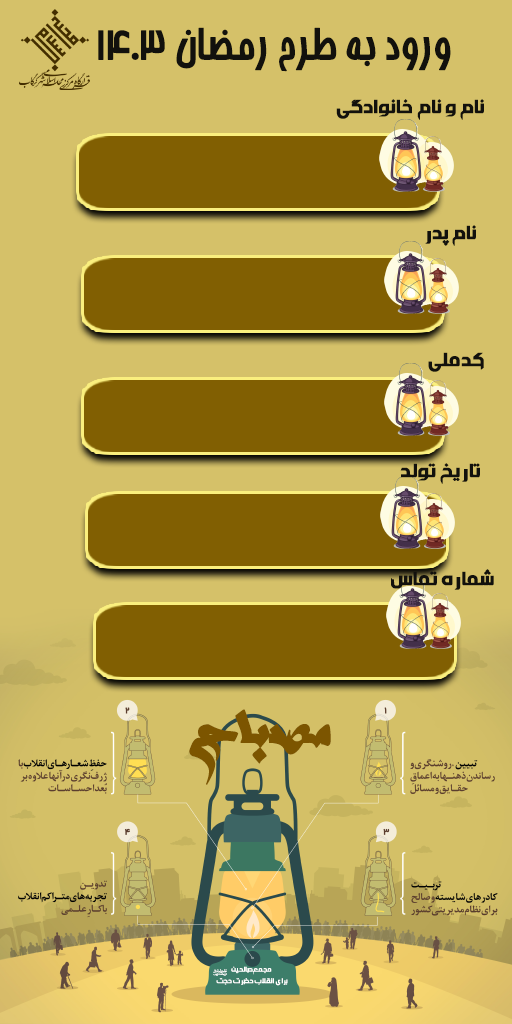
<style>
.page{position:relative;width:512px;height:1024px;background:#d5c169}
.page>*{position:absolute;margin:0}
.t1{font:43.1px "BBardiyaBold";letter-spacing:-0.01em;color:#12110d;font-weight:bold}
.t2{font:23.5px "AAmine-Bold";letter-spacing:-0.01em;color:#12110d;font-weight:bold}
.t3{font:66.7px "ARozeB";letter-spacing:-0.01em;color:#7c5500;font-weight:bold}
.t4{font:8.5px/11.5px "AAmine-Bold";letter-spacing:-0.025em;color:#ffffff;font-weight:bold}
.t5{font:10.1px "Dorood";letter-spacing:-0.025em;color:#ffffff;font-weight:bold}
</style>
<div class="page">
<p class="t1" style="left:98px;top:27px;width:353px;height:45px">ورود به طرح رمضان 1403</p>
<p class="t2" style="left:336px;top:99px;width:148px;height:21px">نام و نام خانوادگی</p>
<p class="t2" style="left:425px;top:225px;width:51px;height:21px">نام پدر</p>
<p class="t2" style="left:428px;top:352px;width:56px;height:20px">کدملی</p>
<p class="t2" style="left:400px;top:463px;width:80px;height:21px">تاریخ تولد</p>
<p class="t2" style="left:391px;top:569px;width:103px;height:21px">شماره تماس</p>
<p class="t3" style="left:189px;top:709px;width:142px;height:76px">مصباح</p>
<p class="t4" style="left:216px;top:966px;width:72px;height:20px;text-align:center">مجمع صالحین <br>برای انقلاب حضرت حجت</p>
<p class="t5" style="left:213px;top:969px;width:14px;height:7px">Q</p>
</div>
